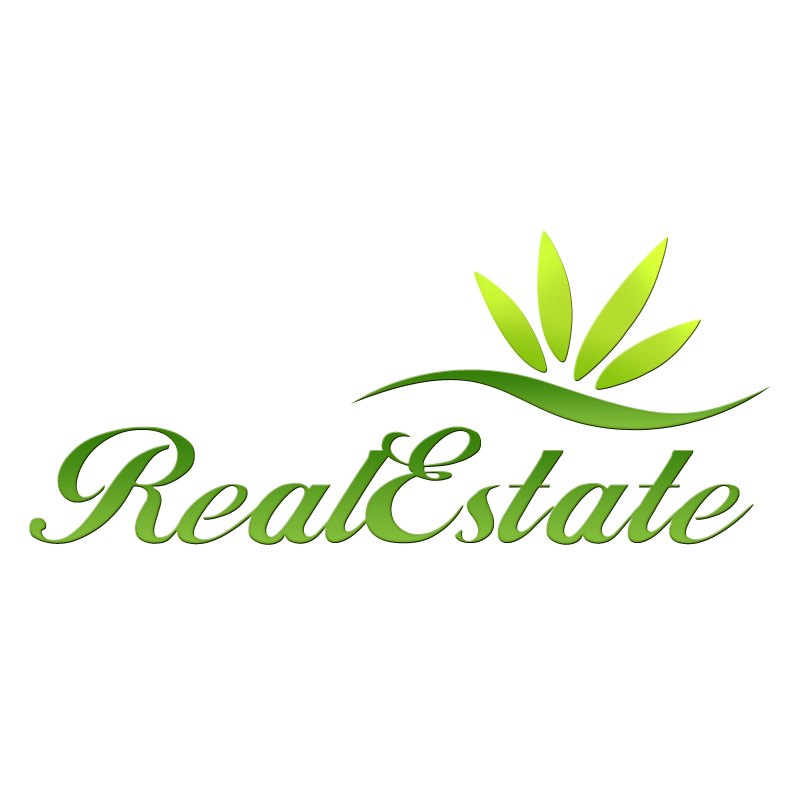
<style>
.page{position:relative;width:800px;height:800px;background:#ffffff}
.page>*{position:absolute;margin:0}
.t1{font:154.2px "Hancock";letter-spacing:-0.015em}
</style>
<div class="page">
<p class="t1" style="left:29px;top:426px;width:725px;height:119px">RealEstate</p>
</div>
